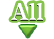
<style>
.page{position:relative;width:54px;height:39px;background:#ffffff}
.page>*{position:absolute;margin:0}
.t1{font:22px "RyuminPro-ExBold";color:#ffffff}
</style>
<div class="page">
<p class="t1" style="left:11px;top:3px;width:32px;height:17px">All</p>
<p class="t1" style="left:11px;top:3px;width:32px;height:17px">All</p>
</div>
